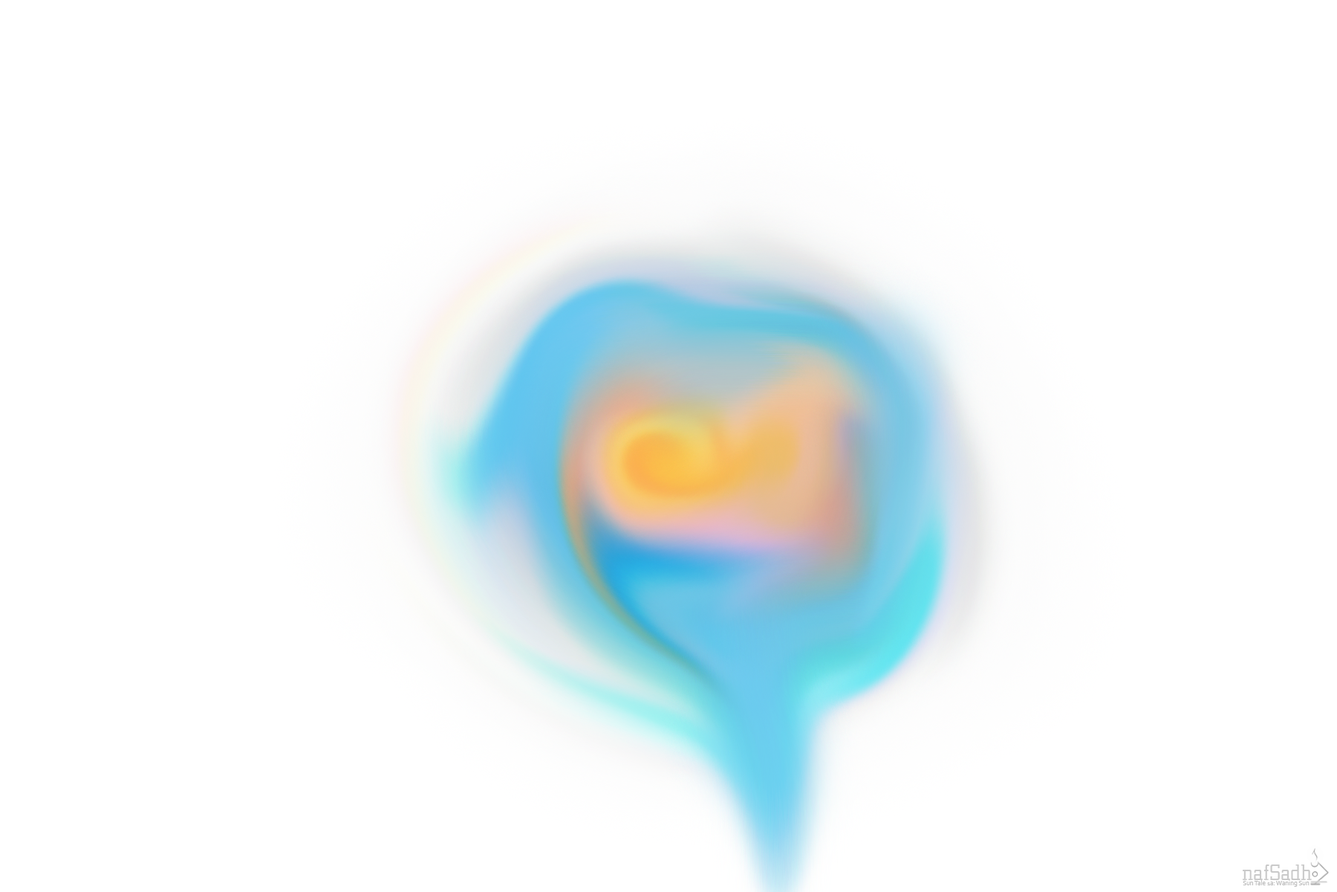
<style>
.page{position:relative;width:1337px;height:892px;background:#ffffff}
.page>*{position:absolute;margin:0}
.t1{font:23.8px "CityD-Ligh";color:#cacaca}
.t2{font:6.7px "Corbel";color:#bbbbbb}
</style>
<div class="page">
<p class="t1" style="left:1243px;top:864px;width:69px;height:16px">nafSadh</p>
<p class="t2" style="left:1243px;top:880px;width:67px;height:6px">Sun Tale 1a: Waning Sun</p>
</div>
